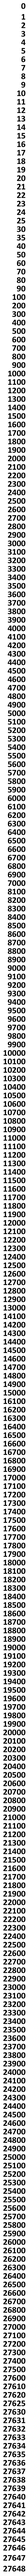
<style>
.page{position:relative;width:28px;height:2576px;background:#ffffff}
.page>*{position:absolute;margin:0}
.t1{font:8.8px/8.5px "Calibri-Bold";color:#000000}
.t2{font:8.8px/10.8px "Calibri-Bold";color:#000000}
.t3{font:8.8px/10.1px "Calibri-Bold";color:#000000}
</style>
<div class="page">
<p class="t1" style="left:3px;top:3px;width:22px;height:2569px;text-align:right"><span class="t2">0<br>1<br></span>2<br>3<br>4<br>5<br>6<br>7<br>8<br>9<br>10<br>11<br>12<br>13<br>14<br>15<br>16<br>17<br>18<br>19<br>20<br>21<br>22<br>23<br>24<br>25<br>30<br>35<br>40<br>50<br>60<br>70<br>80<br>90<br>100<br>200<br>300<br>400<br>500<br>600<br>700<br>800<br>900<br>1000<br>1100<br>1200<br>1300<br>1400<br>1500<br>1600<br>1700<br>1800<br>1900<br>2000<br>2100<br>2200<br>2300<br>2400<br>2500<br>2600<br>2700<br>2800<br>2900<br>3000<br>3100<br>3200<br>3300<br>3400<br>3500<br>3600<br>3700<br>3800<br>3900<br>4000<br>4100<br>4200<br>4300<br>4400<br>4500<br>4600<br>4700<br>4800<br>4900<br>5000<br>5100<br>5200<br>5300<br>5400<br>5500<br>5600<br>5700<br>5800<br>5900<br>6000<br>6100<br>6200<br>6300<br>6400<br>6500<br>6600<br>6700<br>6800<br>6900<br>7000<br>8100<br>8200<br>8300<br>8400<br>8500<br>8600<br>8700<br>8800<br>8900<br>9000<br>9100<br>9200<br>9300<br>9400<br>9500<br>9600<br>9700<br>9800<br>9900<br>10000<br>10100<br>10200<br>10300<br>10400<br>10500<br>10600<br>10700<br>10800<br>10900<br>11000<br>11100<br>11200<br>11300<br>11400<br>11500<br>11600<br>11700<br>11800<br>11900<br>12000<br>12100<br>12200<br>12300<br>12400<br>12500<br>12600<br>12700<br>12800<br>12900<br>13000<br>14100<br>14200<br>14300<br>14400<br>14500<br>14600<br>14700<br>14800<br>14900<br>15000<br>16100<br>16200<br>16300<br>16400<br>16500<br>16600<br>16700<br>16800<br>16900<br>17000<br>17100<br>17200<br>17300<br>17400<br>17500<br>17600<br>17700<br>17800<br>17900<br>18000<br>18100<br>18200<br>18300<br>18400<br>18500<br>18600<br>18700<br>18800<br>18900<br>19000<br>19100<br>19200<br>19300<br>19400<br>19500<br>19600<br>19700<br>19800<br>19900<br>20000<br>20100<br>20200<br>20300<br>20400<br>20500<br>20600<br>20700<br>20800<br>20900<br>21000<br>21100<br>21200<br>21300<br>21400<br>21500<br>21600<br>21700<br>21800<br>21900<br>22000<br>22100<br>22200<br>22300<br>22400<br>22500<br>22600<br>22700<br>22800<br>22900<br>23000<br>23100<br>23200<br>23300<br>23400<br>23500<br>23600<br>23700<br>23800<br>23900<br>24000<br>24100<br>24200<br>24300<br>24400<br>24500<br>24600<br>24700<br>24800<br>24900<br>25000<br>25100<br>25200<br>25300<br>25400<br>25500<br>25600<br>25700<br>25800<br>25900<br>26000<br>26100<br>26200<br>26300<br>26400<br>26500<br>26600<br>26700<br>26800<br>26900<br>27000<br>27100<br>27200<br>27300<br>27400<br>27500<br>27600<br>27610<br>27620<br>27625<br>27630<br>27631<br>27632<br>27633<br>27634<br>27635<br>27636<br>27637<br>27638<br>27639<br>27640<br>27641<br>27642<br>27643<br>27644<br>27645<br>27646<br><span class="t3">27647<br></span><span class="t2">27648</span></p>
</div>
